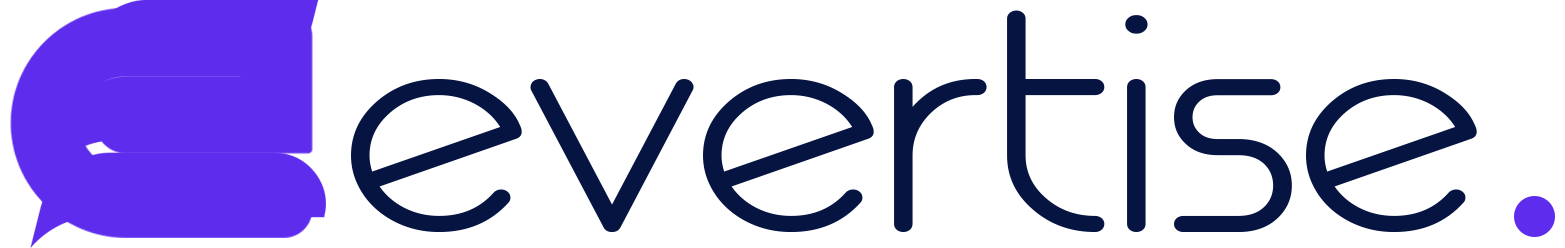
<style>
.page{position:relative;width:1565px;height:248px;background:#ffffff}
.page>*{position:absolute;margin:0}
.t1{font:313.2px "GeomaLightDemo";color:#051441;scale:1.15 1}
</style>
<div class="page">
<p class="t1" style="left:351px;top:10px;width:1126px;height:222px">evertise</p>
</div>
